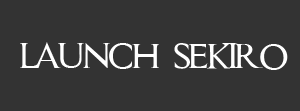
<style>
.page{position:relative;width:300px;height:111px;background:#333333}
.page>*{position:absolute;margin:0}
.t1{font:66.7px "Assassin$";letter-spacing:-0.075em;color:#ffffff}
</style>
<div class="page">
<p class="t1" style="left:20px;top:42px;width:268px;height:28px">launch sekiro</p>
</div>
